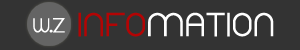
<style>
.page{position:relative;width:300px;height:50px;background:#333333}
.page>*{position:absolute;margin:0}
.t1{font:33px "Donovan-Regular";color:#ffffff;font-weight:bold}
.t2{font:33px "Donovan-Regular";color:#b30404;font-weight:bold}
.t3{font:20.2px "Donovan-Regular";color:#ffffff;font-weight:bold}
.t4{font:20.2px "Donovan-Regular";color:#ffffff;font-weight:bold;scale:0.74 1}
</style>
<div class="page">
<p class="t1" style="left:78px;top:12px;width:196px;height:25px"><span class="t2">INFO</span>MATION</p>
<p class="t3" style="left:33px;top:18px;width:32px;height:15px"><span class="t4">w</span>.z</p>
</div>
